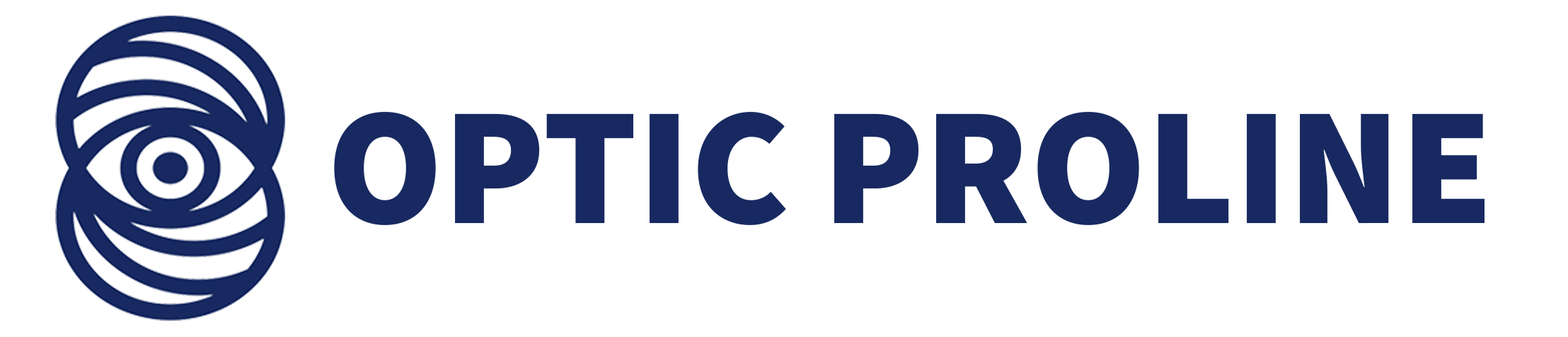
<style>
.page{position:relative;width:1568px;height:337px;background:#ffffff}
.page>*{position:absolute;margin:0}
.t1{font:167.7px "SourceSansRoman-Black";color:#172960}
</style>
<div class="page">
<p class="t1" style="left:334px;top:112px;width:1151px;height:113px">OPTIC PROLINE</p>
</div>
